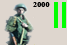
<style>
.page{position:relative;width:67px;height:45px;background:#ded6ce}
.page>*{position:absolute;margin:0}
.t1{font:10.3px "Aparajita-Bold";color:#000000}
</style>
<div class="page">
<p class="t1" style="left:33px;top:2px;width:17px;height:5px">2000</p>
</div>
